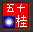
<style>
.page{position:relative;width:33px;height:32px;background:#f20000}
.page>*{position:absolute;margin:0}
.t1{font:10.4px "SimSun";color:#ffffff}
.t2{font:11.7px "SimSun";color:#ffffff}
</style>
<div class="page">
<p class="t1" style="left:7px;top:4px;width:18px;height:8px">五十</p>
<p class="t2" style="left:16px;top:15px;width:11px;height:12px">桂</p>
</div>
